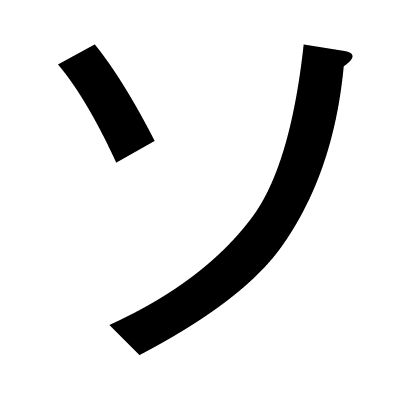
<style>
.page{position:relative;width:400px;height:400px;background:#ffffff}
.page>*{position:absolute;margin:0}
.t1{font:424.8px "MS-PGothic";color:#000000}
</style>
<div class="page">
<p class="t1" style="left:58px;top:44px;width:295px;height:311px">ソ</p>
</div>
